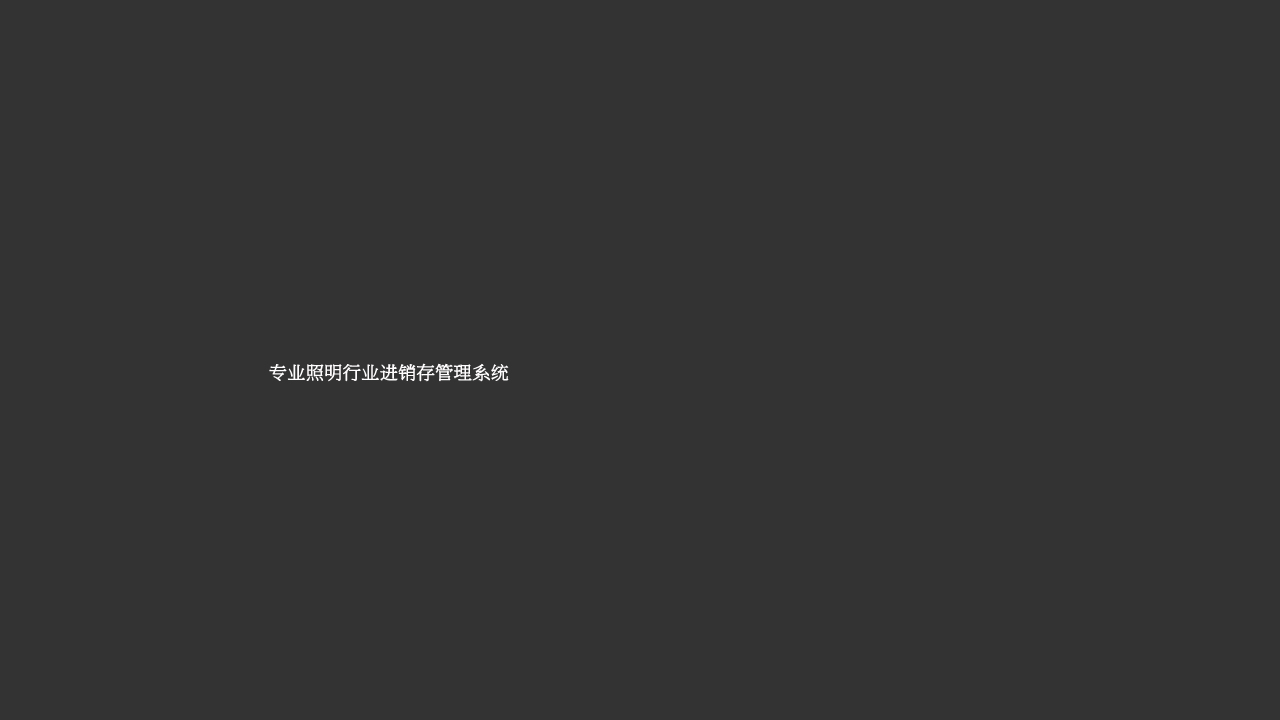
<style>
.page{position:relative;width:1280px;height:720px;background:#333333}
.page>*{position:absolute;margin:0}
.t1{font:18px "MingLiU";color:#fffdfd;font-weight:bold}
.t2{font:30px "NSimSun";color:#fffdfd;font-weight:bold}
</style>
<div class="page">
<p class="t1" style="left:269px;top:363px;width:240px;height:19px"><span class="t2"><br><br><br><br><br> <br>      </span>专业照明行业进销存管理系统</p>
</div>
